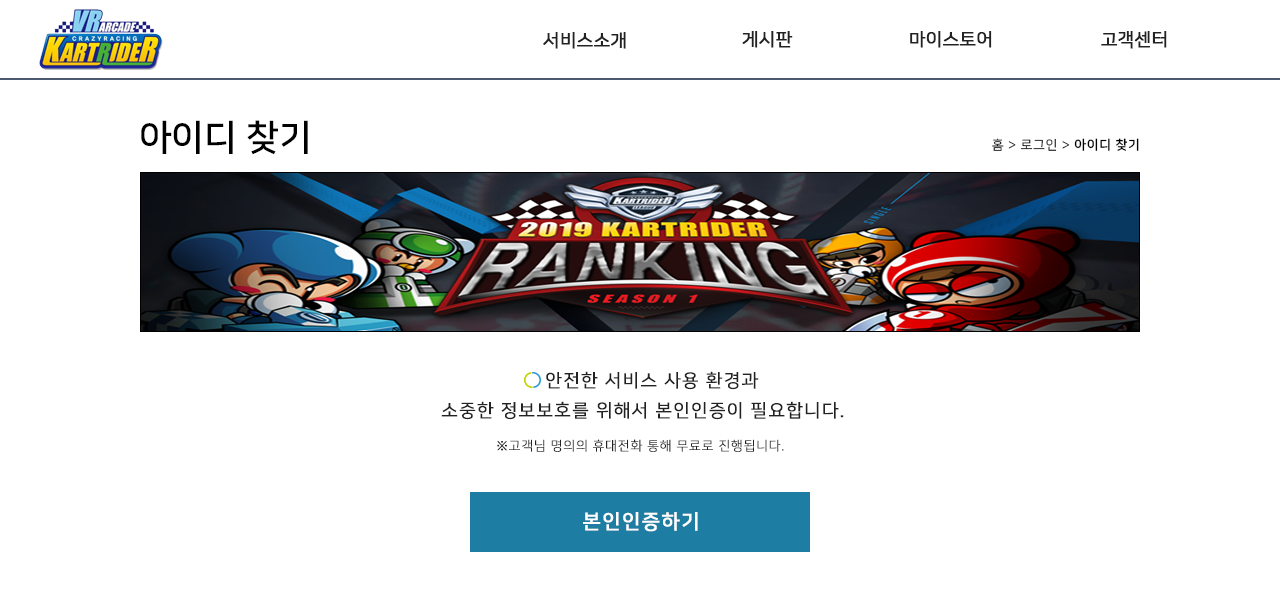
<style>
.page{position:relative;width:1280px;height:596px;background:#ffffff}
.page>*{position:absolute;margin:0}
.t1{font:18px "NanumSquareR";color:#222222;font-weight:bold}
.t2{font:36px "NanumSquareB";color:#000000}
.t3{font:13px "NanumSquareR";letter-spacing:0.05em;color:#000000}
.t4{font:13px "NanumSquareB";letter-spacing:0.05em;color:#000000}
.t5{font:18px/30px "NanumSquareR";letter-spacing:0.05em;color:#222222;text-transform:uppercase;font-weight:bold}
.t6{font:13px "NanumSquareL";letter-spacing:0.05em;color:#222222;text-transform:uppercase;font-weight:bold}
.t7{font:20px "NanumSquareB";letter-spacing:0.05em;color:#ffffff;text-transform:uppercase;font-weight:bold}
</style>
<div class="page">
<p class="t1" style="left:742px;top:30px;width:51px;height:18px">게시판</p>
<p class="t1" style="left:910px;top:30px;width:82px;height:18px">마이스토어</p>
<p class="t1" style="left:1101px;top:30px;width:66px;height:18px">고객센터</p>
<p class="t1" style="left:543px;top:31px;width:83px;height:18px">서비스소개</p>
<p class="t2" style="left:141px;top:120px;width:167px;height:35px">아이디 찾기</p>
<p class="t3" style="left:992px;top:138px;width:147px;height:13px">홈 &gt; 로그인 &gt; <span class="t4">아이디 찾기</span></p>
<p class="t5" style="left:441px;top:371px;width:403px;height:49px;text-align:center">안전한 서비스 사용 환경과<br>소중한 정보보호를 위해서 본인인증이 필요합니다.</p>
<p class="t6" style="left:497px;top:439px;width:287px;height:13px">※고객님 명의의 휴대전화 통해 무료로 진행됩니다.</p>
<p class="t7" style="left:583px;top:512px;width:115px;height:20px">본인인증하기</p>
</div>
